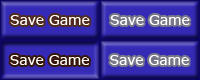
<style>
.page{position:relative;width:200px;height:80px;background:#342ab6}
.page>*{position:absolute;margin:0}
.t1{font:13.9px "MSReferenceSansSerif";color:#ffffff}
</style>
<div class="page">
<p class="t1" style="left:10px;top:15px;width:80px;height:10px">Save Game</p>
<p class="t1" style="left:110px;top:15px;width:80px;height:10px">Save Game</p>
<p class="t1" style="left:10px;top:55px;width:79px;height:10px">Save Game</p>
<p class="t1" style="left:110px;top:55px;width:79px;height:10px">Save Game</p>
</div>
